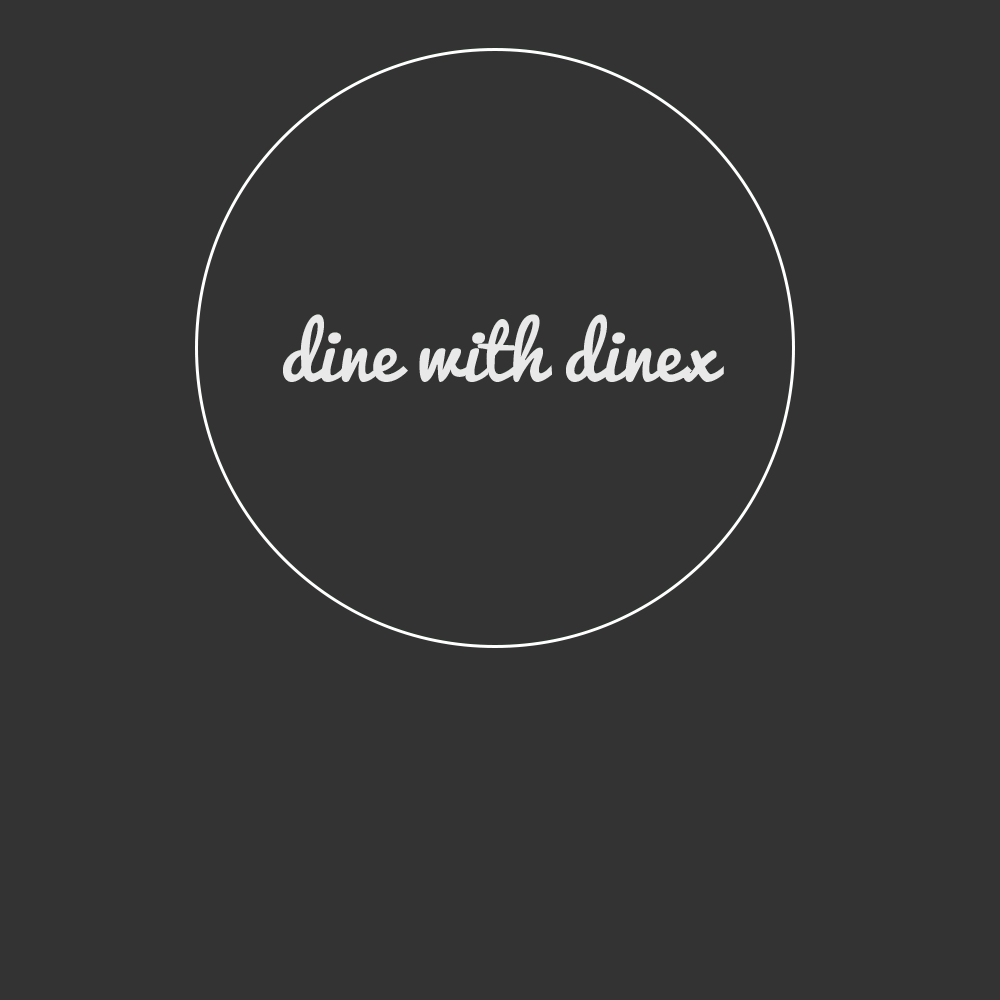
<style>
.page{position:relative;width:1000px;height:1000px;background:#333333}
.page>*{position:absolute;margin:0}
.t1{font:72px "Pacifico-Regular";color:#e9e9e9}
</style>
<div class="page">
<p class="t1" style="left:283px;top:314px;width:441px;height:68px">dine with dinex</p>
</div>
